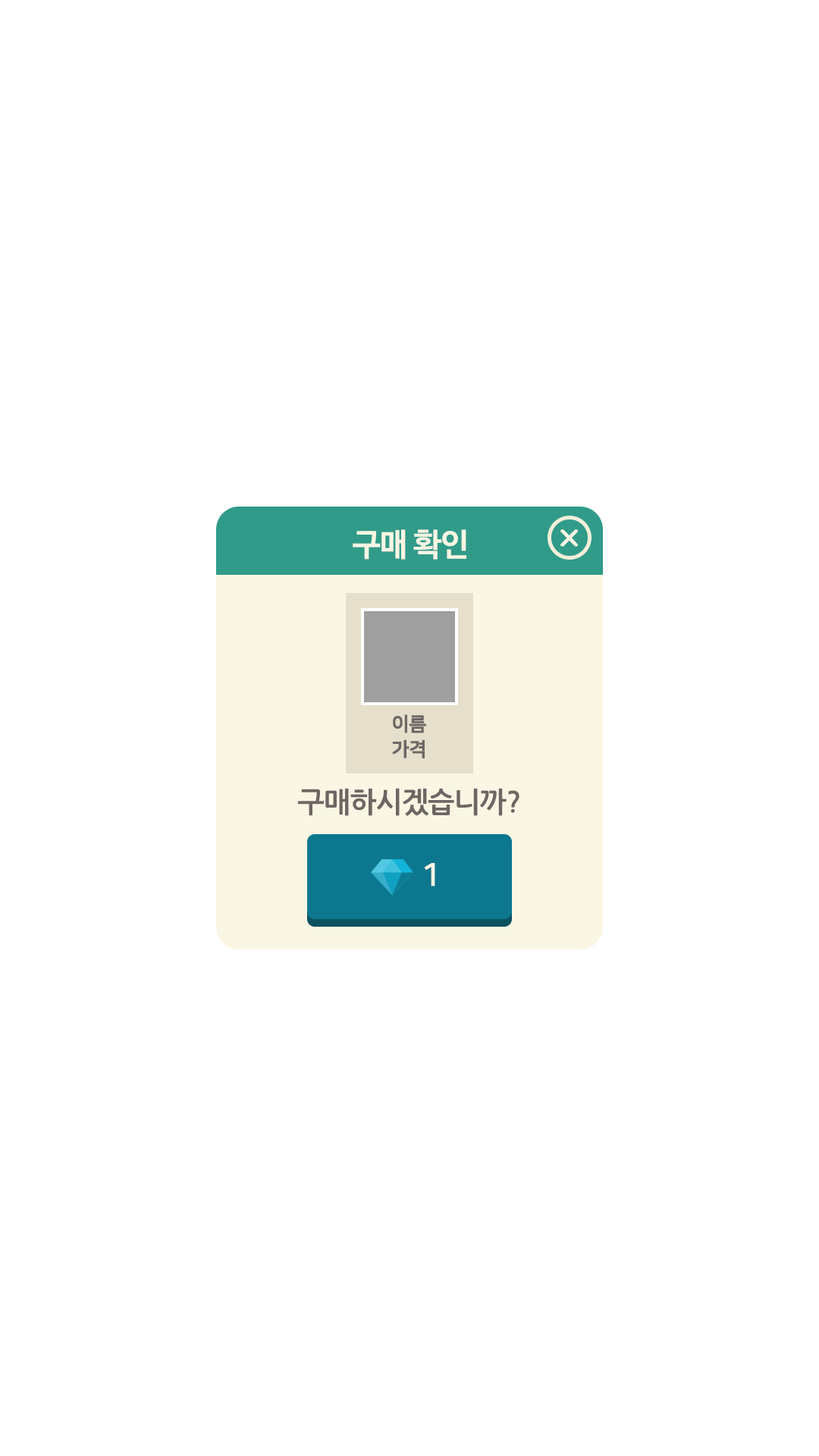
<style>
.page{position:relative;width:819px;height:1456px;background:#ffffff}
.page>*{position:absolute;margin:0}
.t1{font:31.6px "NanumBarunGothicBold";letter-spacing:-0.025em;color:#faf6e4}
.t2{font:30.3px "DXLBaB-KSCpc-EUC-H";letter-spacing:-0.025em;color:#faf6e4;scale:1.3 1}
.t3{font:19px/25.3px "NanumSquareOTFB";letter-spacing:-0.025em;color:#6e6664;font-weight:bold}
.t4{font:28.4px "NanumGothicBold";letter-spacing:-0.025em;color:#6e6664}
.t5{font:31.6px "NanumSquareOTFB";letter-spacing:-0.025em;color:#faf6e4}
</style>
<div class="page">
<p class="t1" style="left:353px;top:529px;width:113px;height:31px">구매 확인</p>
<p class="t2" style="left:560px;top:529px;width:19px;height:18px">x</p>
<p class="t3" style="left:392px;top:714px;width:34px;height:44px;text-align:center">이름<br>가격</p>
<p class="t4" style="left:298px;top:788px;width:221px;height:28px">구매하시겠습니까?</p>
<p class="t5" style="left:424px;top:863px;width:11px;height:23px">1</p>
</div>
